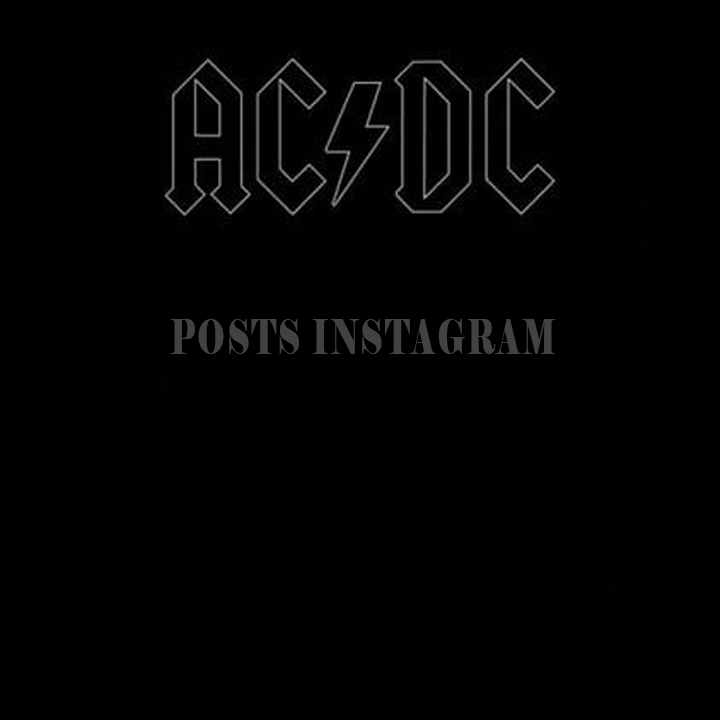
<style>
.page{position:relative;width:720px;height:720px;background:#010101}
.page>*{position:absolute;margin:0}
.t1{font:47.8px "Elephant-Regular";letter-spacing:0.075em;color:#414342;scale:0.64 1}
</style>
<div class="page">
<p class="t1" style="left:170px;top:319px;width:386px;height:35px">POSTS INSTAGRAM</p>
</div>
